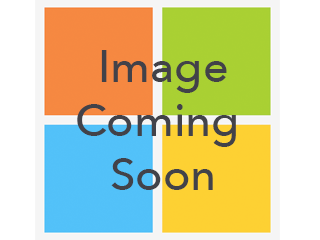
<style>
.page{position:relative;width:320px;height:240px;background:#ffffff}
.page>*{position:absolute;margin:0}
.t1{font:45px "AvenirNext-Medium";color:#424249}
</style>
<div class="page">
<p class="t1" style="left:77px;top:50px;width:159px;height:140px;text-align:center">Image<br>Coming <br>Soon</p>
</div>
